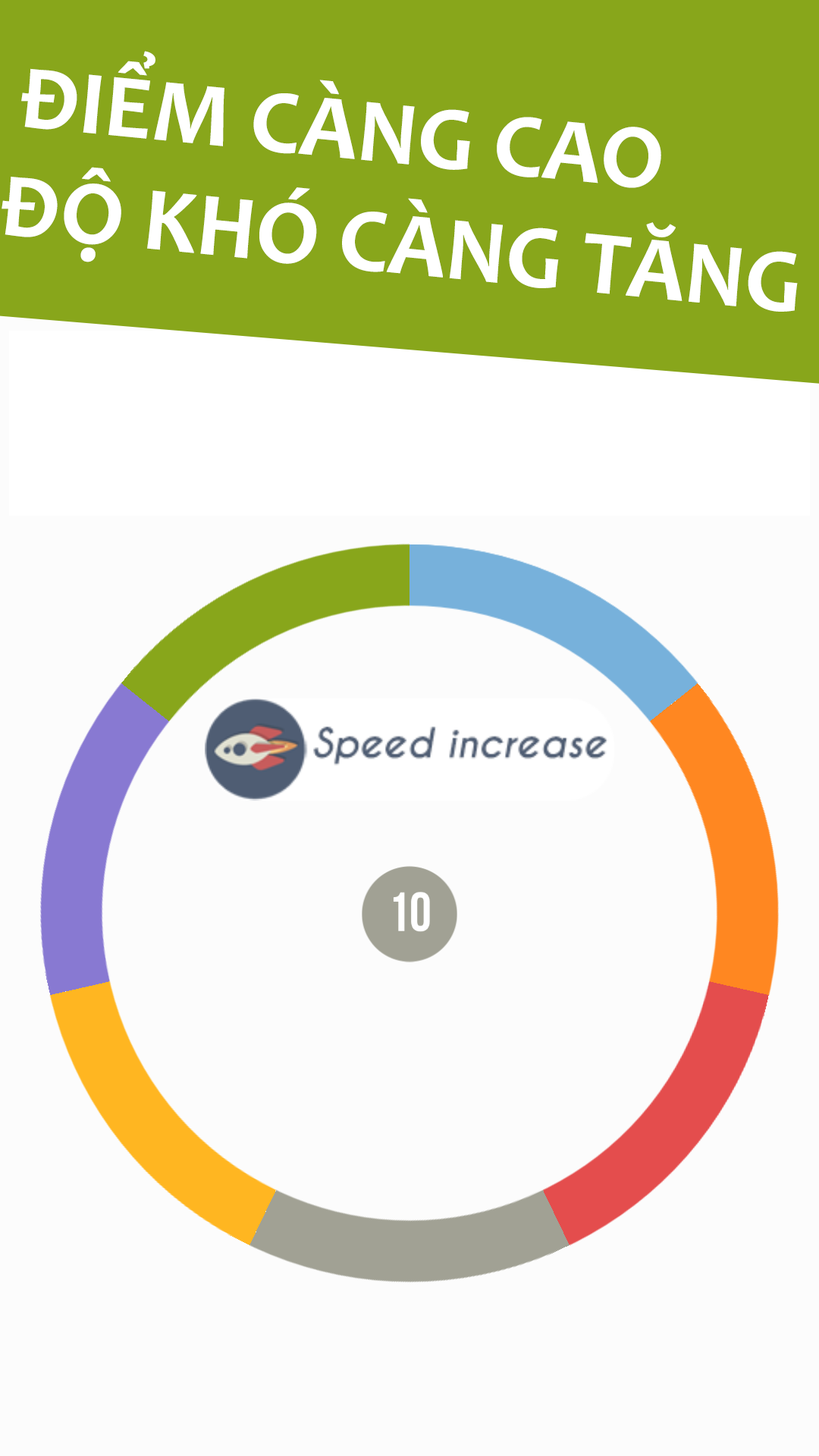
<style>
.page{position:relative;width:819px;height:1456px;background:#fcfcfc}
.page>*{position:absolute;margin:0}
.t1{font:91px "Candara-Bold";color:#ffffff}
</style>
<div class="page">
<p class="t1" style="left:2px;top:51px;width:796px;height:261px;rotate:6deg">ĐIỂM CÀNG CAO<br>ĐỘ KHÓ CÀNG TĂNG</p>
</div>
